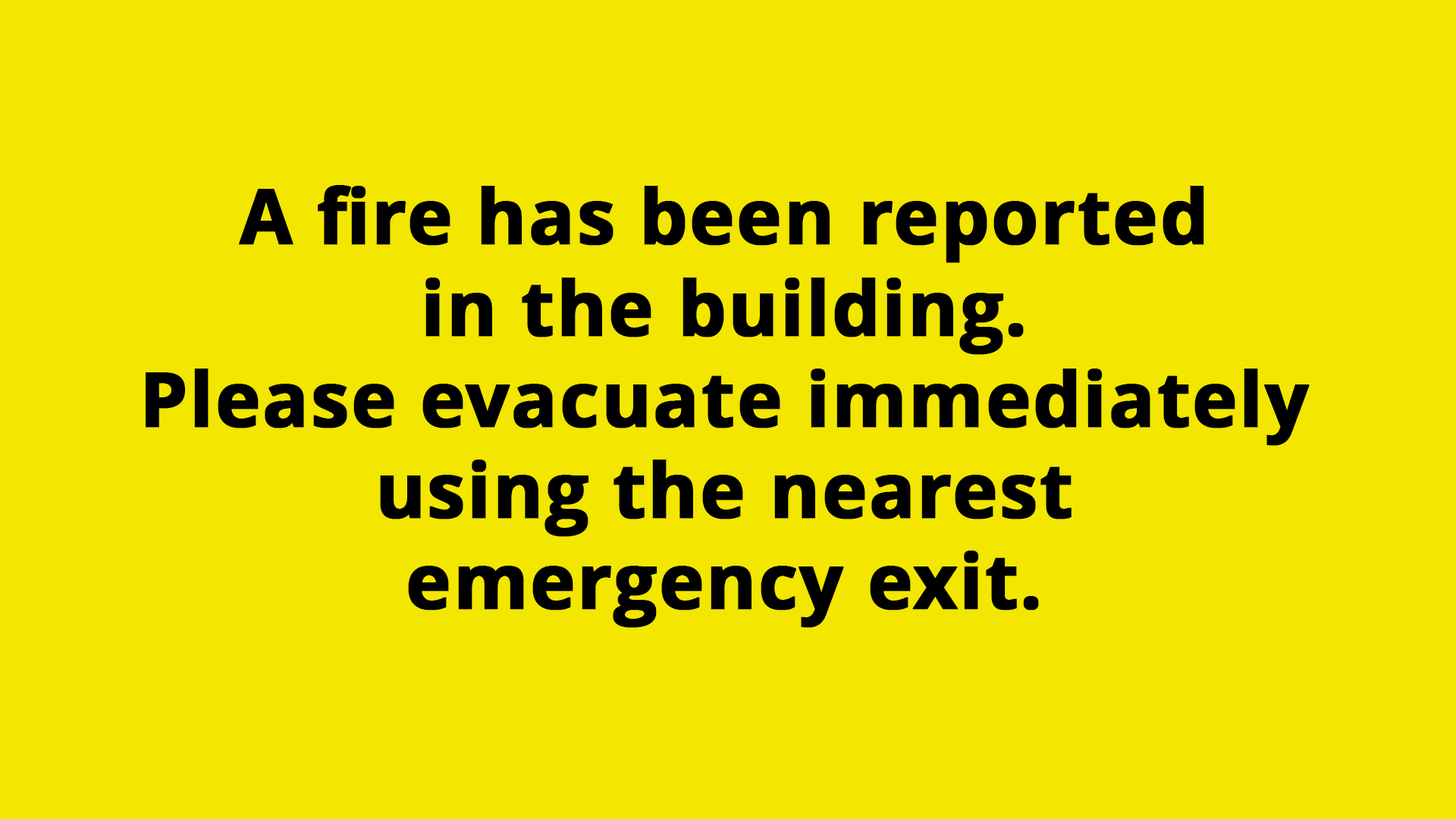
<style>
.page{position:relative;width:1456px;height:819px;background:#f3e600}
.page>*{position:absolute;margin:0}
.t1{font:75.8px "OpenSans-Bold";letter-spacing:0.005em;color:#000000;font-weight:bold}
</style>
<div class="page">
<p class="t1" style="left:146px;top:185px;width:1164px;height:443px;text-align:center">A fire has been reported <br>in the building. <br>Please evacuate immediately <br>using the nearest <br>emergency exit.</p>
</div>
